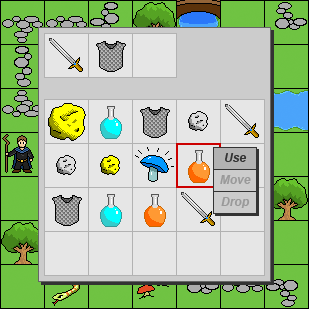
<style>
.page{position:relative;width:311px;height:315px;background:#e6e6e6}
.page>*{position:absolute;margin:0}
.t1{font:12px "Arial-BoldItalicMT";color:#333333}
.t2{font:12px "Arial-BoldItalicMT";color:#999999}
</style>
<div class="page">
<p class="t1" style="left:225px;top:153px;width:22px;height:9px">Use</p>
<p class="t2" style="left:220px;top:175px;width:31px;height:9px">Move</p>
<p class="t2" style="left:221px;top:197px;width:29px;height:11px">Drop</p>
</div>
